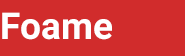
<style>
.page{position:relative;width:185px;height:56px;background:#d12c2c}
.page>*{position:absolute;margin:0}
.t1{font:37px "Roboto-Bold";color:#ffffff}
</style>
<div class="page">
<p class="t1" style="left:2px;top:12px;width:110px;height:28px">Foame</p>
</div>
